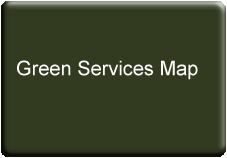
<style>
.page{position:relative;width:227px;height:158px;background:#323b20}
.page>*{position:absolute;margin:0}
.t1{font:20px "ArialMT";color:#fefefe}
</style>
<div class="page">
<p class="t1" style="left:17px;top:60px;width:181px;height:20px">Green Services Map</p>
</div>
